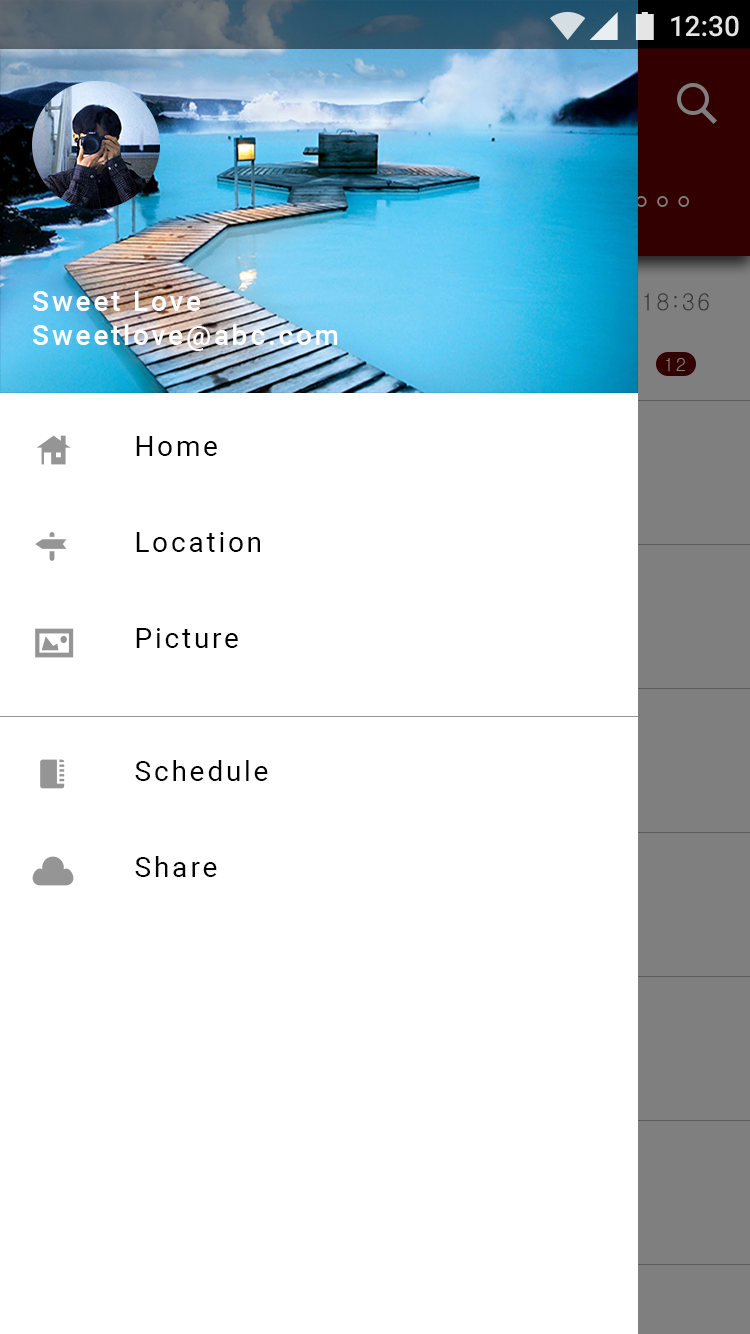
<style>
.page{position:relative;width:750px;height:1334px;background:#ffffff}
.page>*{position:absolute;margin:0}
.t1{font:28px "Roboto-Medium";letter-spacing:0.1em;color:#ffffff}
.t2{font:28px/96px "Roboto-Regular";letter-spacing:0.1em;color:#000000}
</style>
<div class="page">
<p class="t1" style="left:33px;top:291px;width:305px;height:60px">Sweet Love<br>Sweetlove@abc.com</p>
<p class="t2" style="left:136px;top:436px;width:124px;height:212px">Home<br>Location<br>Picture</p>
<p class="t2" style="left:135px;top:760px;width:133px;height:117px">Schedule<br>Share</p>
</div>
